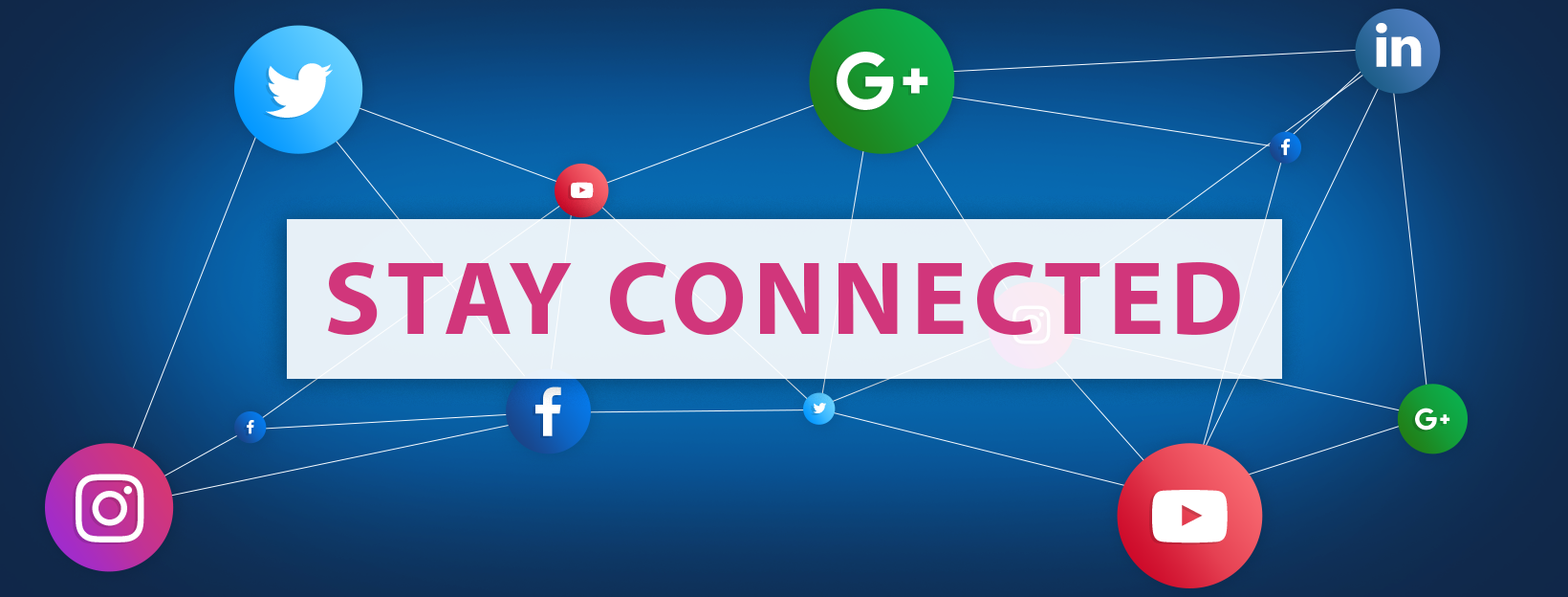
<style>
.page{position:relative;width:1568px;height:597px}
.page>*{position:absolute;margin:0}
.t1{font:105.2px "MyriadPro-Bold";letter-spacing:0.06em;color:#d1367b;text-transform:uppercase}
</style>
<div class="page">
<p class="t1" style="left:328px;top:262px;width:912px;height:73px">Stay Connected</p>
</div>
